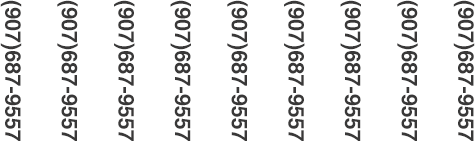
<style>
.page{position:relative;width:475px;height:141px;background:#ffffff}
.page>*{position:absolute;margin:0}
.t1{font:21.7px "Helvetica-Bold";color:#393838}
</style>
<div class="page">
<p class="t1" style="left:0px;top:0px;width:22px;height:141px;rotate:90deg">(907)687-9557</p>
<p class="t1" style="left:57px;top:0px;width:21px;height:141px;rotate:90deg">(907)687-9557</p>
<p class="t1" style="left:114px;top:0px;width:21px;height:141px;rotate:90deg">(907)687-9557</p>
<p class="t1" style="left:170px;top:0px;width:21px;height:141px;rotate:90deg">(907)687-9557</p>
<p class="t1" style="left:227px;top:0px;width:21px;height:141px;rotate:90deg">(907)687-9557</p>
<p class="t1" style="left:284px;top:0px;width:21px;height:141px;rotate:90deg">(907)687-9557</p>
<p class="t1" style="left:340px;top:0px;width:21px;height:141px;rotate:90deg">(907)687-9557</p>
<p class="t1" style="left:397px;top:0px;width:21px;height:141px;rotate:90deg">(907)687-9557</p>
<p class="t1" style="left:453px;top:0px;width:22px;height:141px;rotate:90deg">(907)687-9557</p>
</div>
